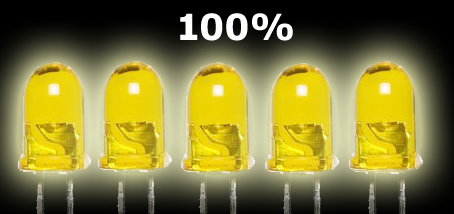
<style>
.page{position:relative;width:454px;height:214px}
.page>*{position:absolute;margin:0}
.t1{font:36px "Verdana-Bold";color:#ffffff}
</style>
<div class="page">
<p class="t1" style="left:180px;top:13px;width:113px;height:28px">100%</p>
</div>
